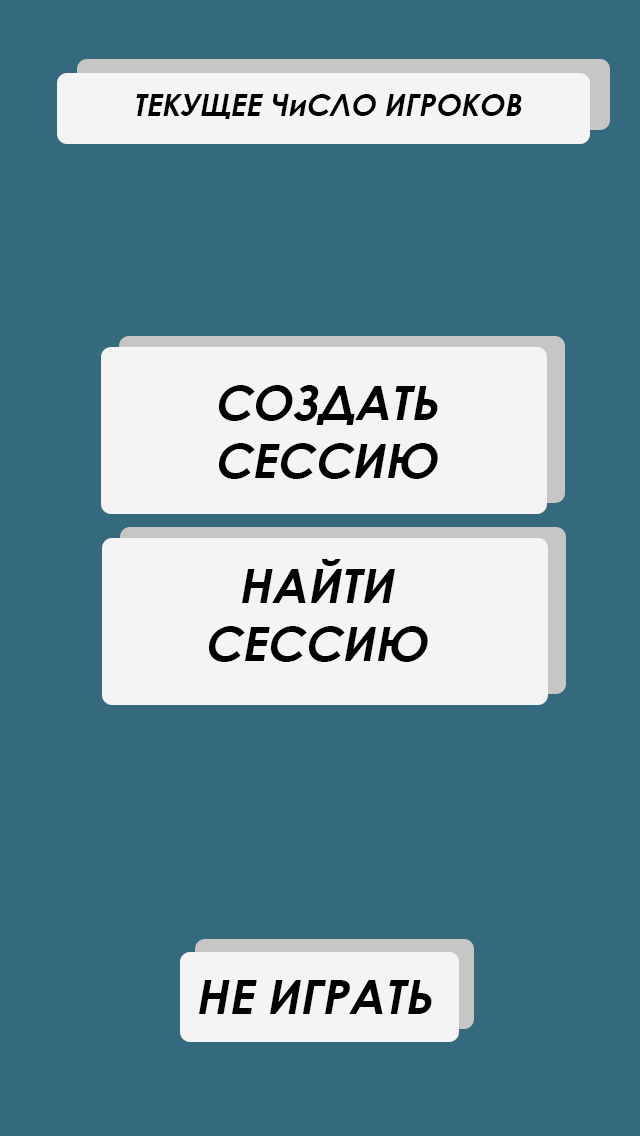
<style>
.page{position:relative;width:640px;height:1136px;background:#356a7e}
.page>*{position:absolute;margin:0}
.t1{font:30px "CenturyGothic-Bold";color:#020202;font-style:italic}
.t2{font:48px "CenturyGothic-Bold";color:#020202;font-style:italic}
</style>
<div class="page">
<p class="t1" style="left:136px;top:94px;width:386px;height:25px">ТЕКУЩЕЕ ЧиСЛО ИГРОКОВ</p>
<p class="t2" style="left:218px;top:385px;width:220px;height:94px;text-align:center">СОЗДАТЬ СЕССИЮ</p>
<p class="t2" style="left:208px;top:559px;width:220px;height:103px;text-align:center">НАЙТИ<br>СЕССИЮ</p>
<p class="t2" style="left:199px;top:980px;width:233px;height:34px">НЕ ИГРАТЬ</p>
</div>
